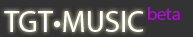
<style>
.page{position:relative;width:193px;height:37px;background:#333333}
.page>*{position:absolute;margin:0}
.t1{font:30px "MyriadPro-Regular";color:#ffffff}
.t2{font:18px "MyriadPro-Regular";color:#b109d5}
</style>
<div class="page">
<p class="t1" style="left:4px;top:11px;width:140px;height:21px">TGT•MUSIC</p>
<p class="t2" style="left:148px;top:7px;width:32px;height:13px">beta</p>
</div>
